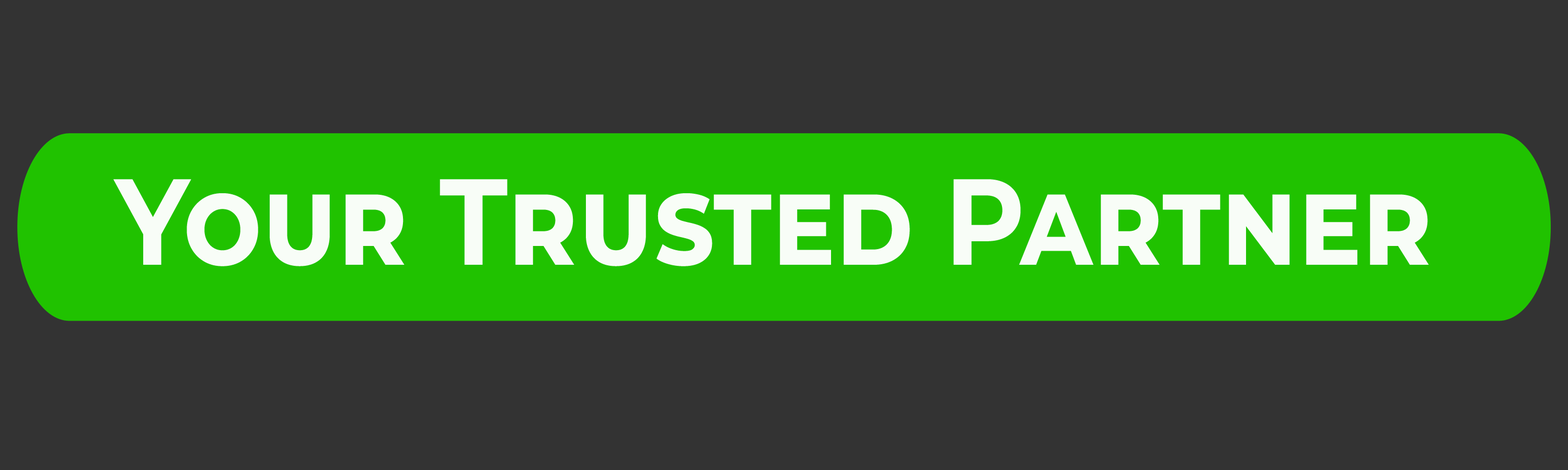
<style>
.page{position:relative;width:1568px;height:470px;background:#333333}
.page>*{position:absolute;margin:0}
.t1{font:122.2px "Montserrat-Bold";color:#ffffff;font-variant:small-caps;scale:0.9 1}
</style>
<div class="page">
<p class="t1" style="left:113px;top:179px;width:1316px;height:88px;opacity:0.97">Your Trusted Partner</p>
</div>
